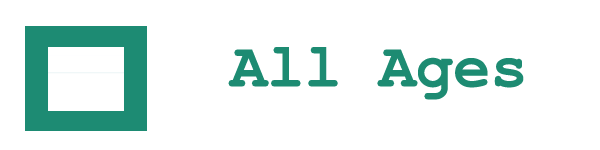
<style>
.page{position:relative;width:600px;height:150px;background:#ffffff}
.page>*{position:absolute;margin:0}
.t1{font:62px "CourierNewPS-BoldMT";color:#1d8b72}
</style>
<div class="page">
<p class="t1" style="left:228px;top:47px;width:296px;height:53px">All Ages</p>
</div>
